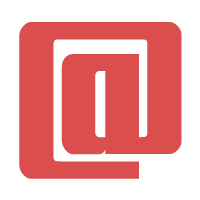
<style>
.page{position:relative;width:200px;height:200px;background:#ffffff}
.page>*{position:absolute;margin:0}
.t1{font:165px "MyPuma";color:#db4e4e;scale:0.91 1}
</style>
<div class="page">
<p class="t1" style="left:19px;top:22px;width:163px;height:157px">@</p>
</div>
